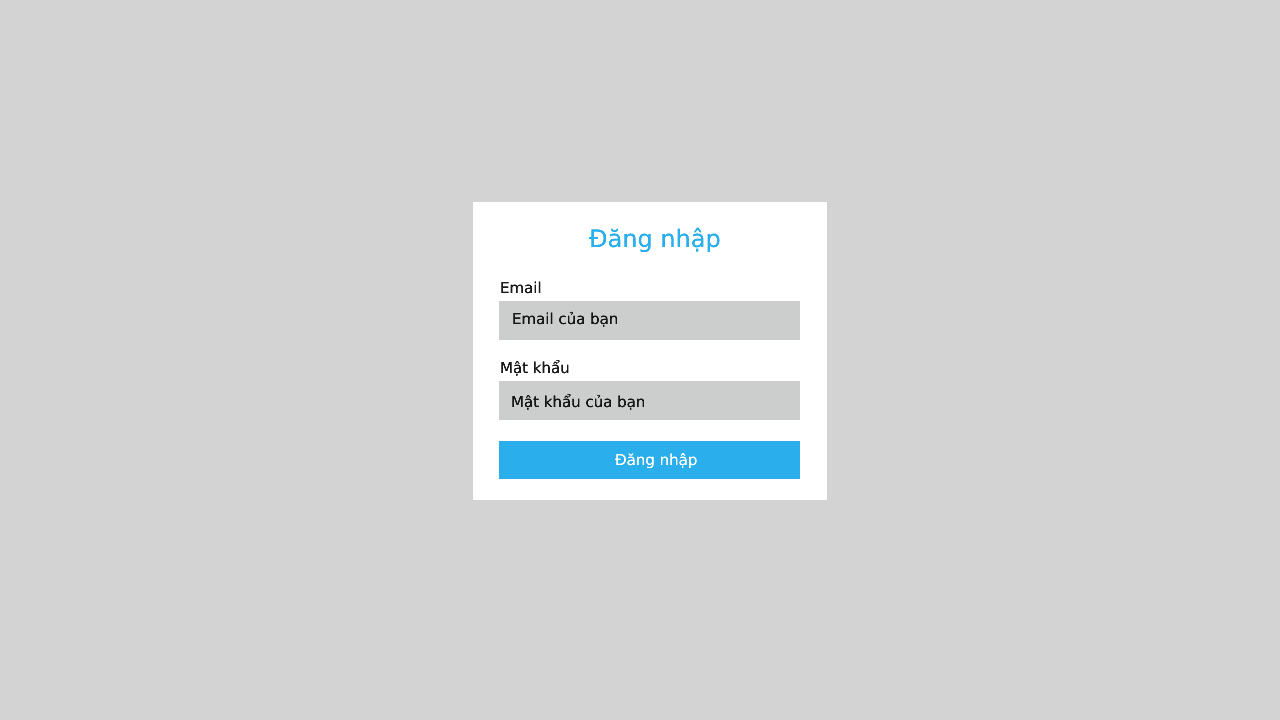
<style>
.page{position:relative;width:1280px;height:720px;background:#d3d3d3}
.page>*{position:absolute;margin:0}
.t1{font:24px "DejaVuSans";color:#2aafec}
.t2{font:15px "DejaVuSans";color:#1b1b1b}
.t3{font:15px "DejaVuSans";color:#171717}
.t4{font:15px "DejaVuSans";color:#ffffff}
</style>
<div class="page">
<p class="t1" style="left:589px;top:227px;width:131px;height:25px">Đăng nhập</p>
<p class="t2" style="left:501px;top:281px;width:40px;height:13px">Email</p>
<p class="t3" style="left:513px;top:311px;width:105px;height:16px">Email của bạn</p>
<p class="t2" style="left:501px;top:360px;width:68px;height:16px">Mật khẩu</p>
<p class="t3" style="left:512px;top:394px;width:133px;height:16px">Mật khẩu của bạn</p>
<p class="t4" style="left:615px;top:453px;width:82px;height:16px">Đăng nhập</p>
</div>
